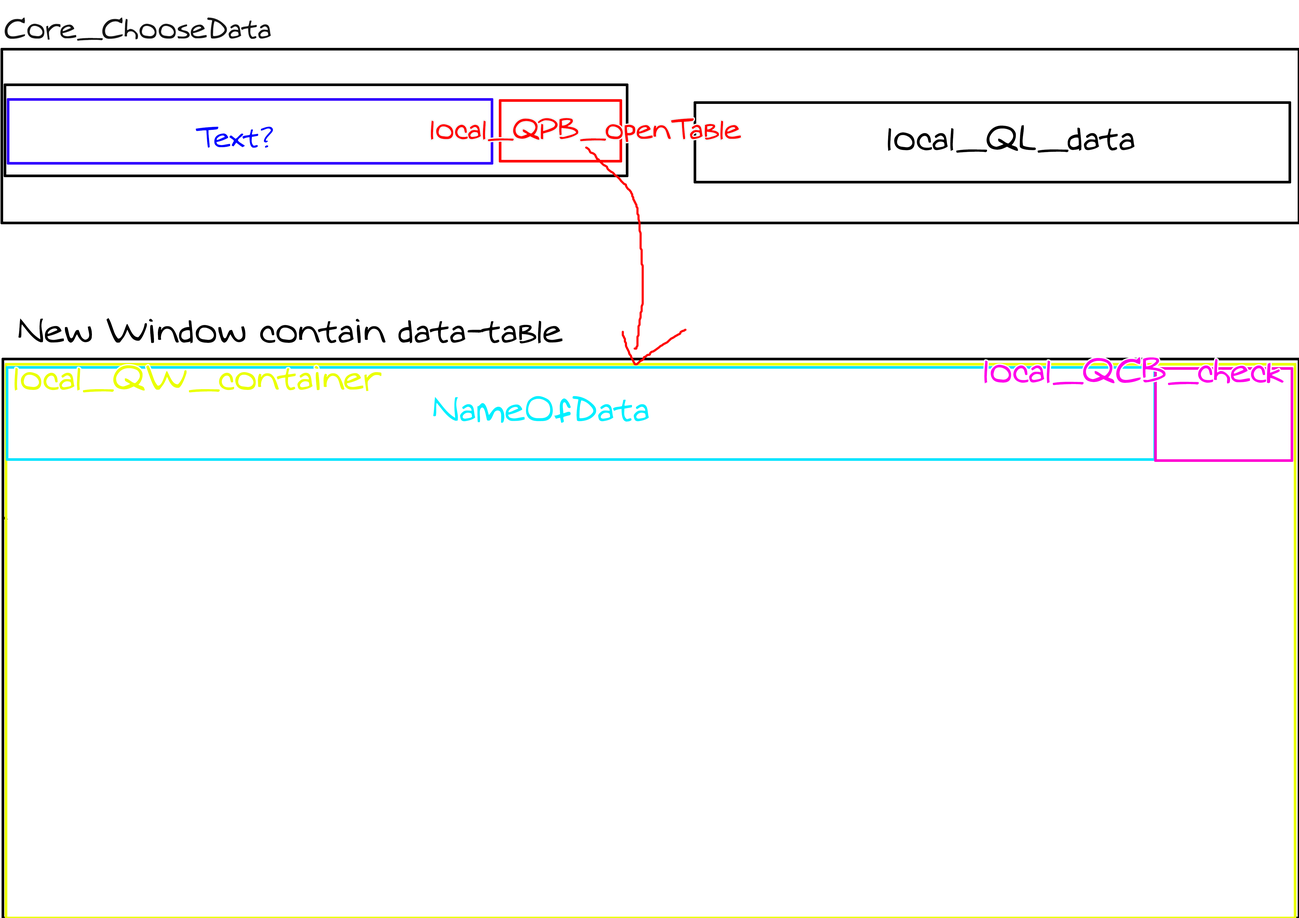
<style>
.page{position:relative;width:1299px;height:918px;background:#ffffff}
.page>*{position:absolute;margin:0}
.t1{font:27.3px "MTOaugie-Regular";color:#151515}
.t2{font:27.3px "MTOaugie-Regular";color:#ff0000}
.t3{font:32.7px "MTOaugie-Regular";color:#000000}
.t4{font:27.3px "MTOaugie-Regular";color:#0006ff}
.t5{font:32.7px "MTOaugie-Regular";color:#eaff00}
.t6{font:32.7px "MTOaugie-Regular";color:#ff00ea}
.t7{font:32.7px "MTOaugie-Regular";color:#00f0ff}
</style>
<div class="page">
<p class="t1" style="left:4px;top:18px;width:267px;height:23px">Core_ChooseData</p>
<p class="t2" style="left:431px;top:118px;width:310px;height:24px">local_QPB_openTable</p>
<p class="t3" style="left:887px;top:125px;width:247px;height:28px">local_QL_data</p>
<p class="t4" style="left:196px;top:127px;width:77px;height:21px">Text?</p>
<p class="t3" style="left:18px;top:318px;width:545px;height:26px">New Window contain data-table</p>
<p class="t5" style="left:14px;top:365px;width:367px;height:28px">local_QW_container</p>
<p class="t6" style="left:984px;top:357px;width:299px;height:28px">local_QCB_check</p>
<p class="t7" style="left:433px;top:396px;width:216px;height:27px">NameOfData</p>
</div>
